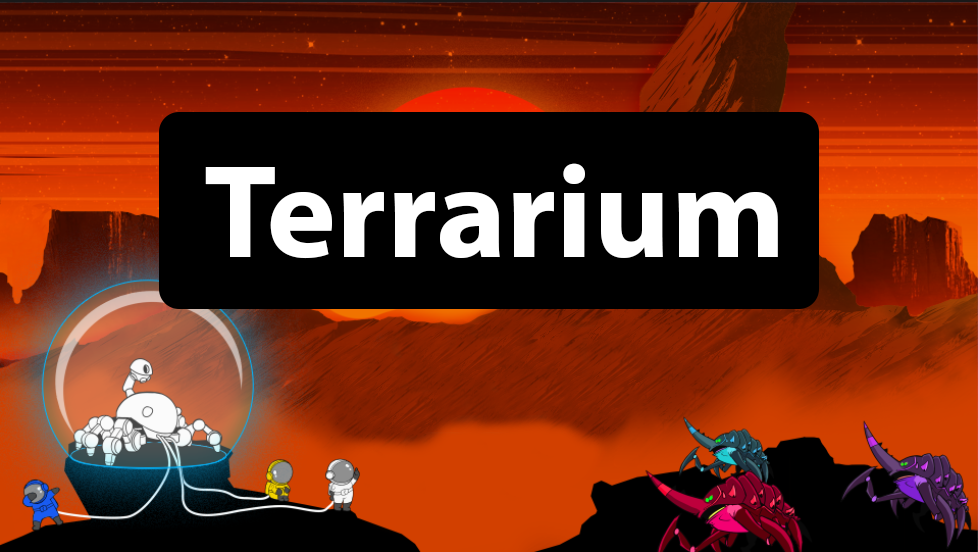
<style>
.page{position:relative;width:978px;height:552px;background:#000000}
.page>*{position:absolute;margin:0}
.t1{font:133.1px "MyriadPro-Bold";color:#ffffff}
</style>
<div class="page">
<p class="t1" style="left:205px;top:163px;width:573px;height:96px">Terrarium</p>
</div>
